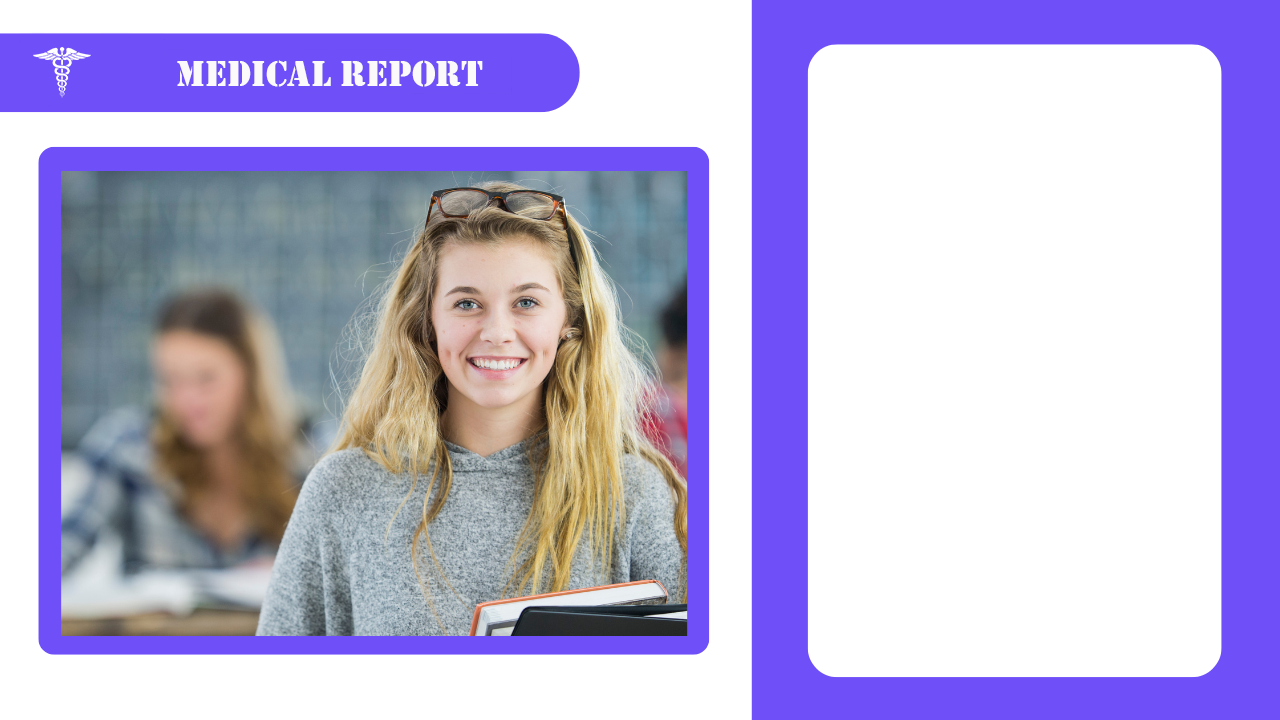
<style>
.page{position:relative;width:1280px;height:720px;background:#ffffff}
.page>*{position:absolute;margin:0}
.t1{font:37.3px "Stencil";color:#fbf9f9}
</style>
<div class="page">
<p class="t1" style="left:177px;top:60px;width:306px;height:27px">Medical Report</p>
</div>
